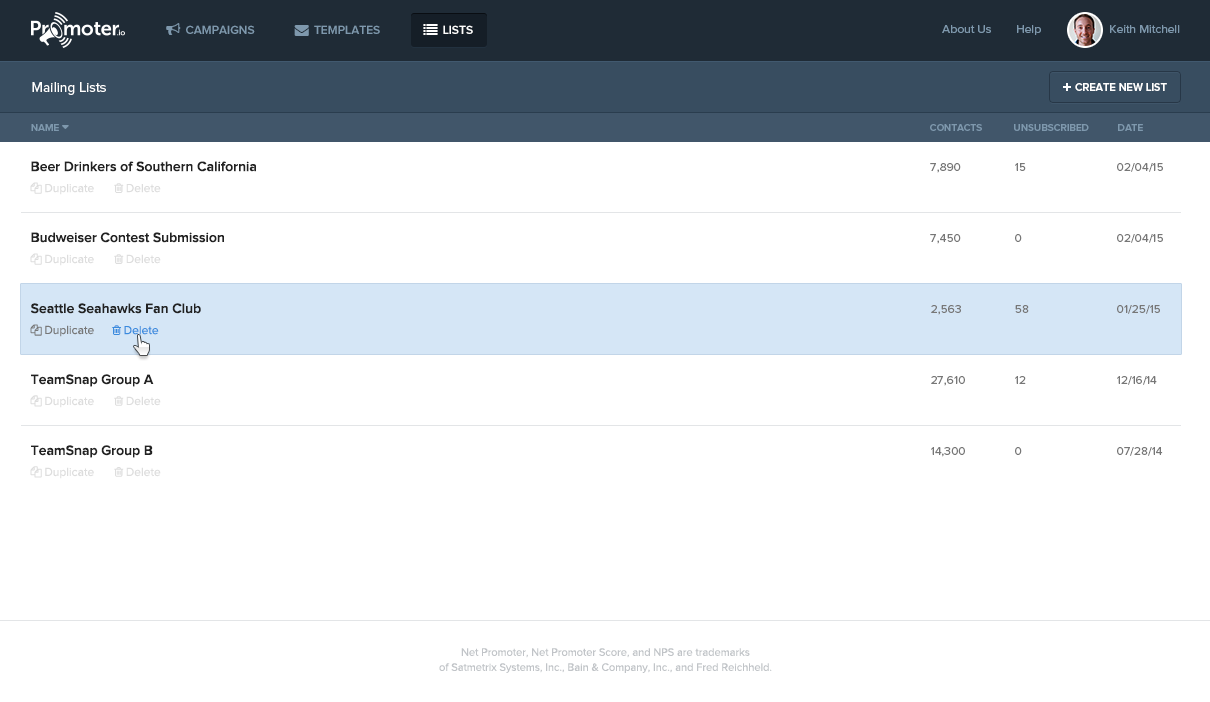
<style>
.page{position:relative;width:1210px;height:702px;background:#ffffff}
.page>*{position:absolute;margin:0}
.t1{font:12px "ProximaNova-Regular";color:#7e98ad}
.t2{font:14px "ProximaNova-Regular";color:#ffffff}
.t3{font:11px "ProximaNova-Semibold";color:#ffffff;text-transform:uppercase}
.t4{font:10px "ProximaNova-Semibold";color:#7e98ad;text-transform:uppercase}
.t5{font:12px/50px "ProximaNova-Regular";color:#777777}
.t6{font:12px/21px "ProximaNova-Regular";color:#777777}
.t7{font:11px/15px "ProximaNova-Regular";color:#c1c4c8}
</style>
<div class="page">
<p class="t1" style="left:942px;top:25px;width:238px;height:10px">About Us        Help                      Keith Mitchell</p>
<p class="t2" style="left:32px;top:82px;width:74px;height:13px">Mailing Lists</p>
<p class="t3" style="left:1075px;top:83px;width:92px;height:8px">Create New list</p>
<p class="t4" style="left:930px;top:124px;width:52px;height:7px">Contacts</p>
<p class="t4" style="left:1014px;top:124px;width:75px;height:7px">Unsubscribed</p>
<p class="t4" style="left:1118px;top:124px;width:25px;height:7px">date</p>
<p class="t5" style="left:930px;top:163px;width:35px;height:294px"><span class="t6">7,890<br><br></span>7,450<br><br>2,563<br><br>27,610<br><br>14,300<br><br>32,540</p>
<p class="t5" style="left:1015px;top:163px;width:14px;height:292px"><span class="t6">15<br><br></span>0<br><br>58<br><br>12<br><br>0<br><br>32,540</p>
<p class="t5" style="left:1117px;top:163px;width:46px;height:293px">02/04/15<br><br>02/04/15<br><br>01/25/15<br><br>12/16/14<br><br>07/28/14<br><br>04/28/13</p>
<p class="t7" style="left:439px;top:648px;width:333px;height:25px;text-align:center">Net Promoter, Net Promoter Score, and NPS are trademarks<br>of Satmetrix Systems, Inc., Bain &amp; Company, Inc., and Fred Reichheld.</p>
</div>
